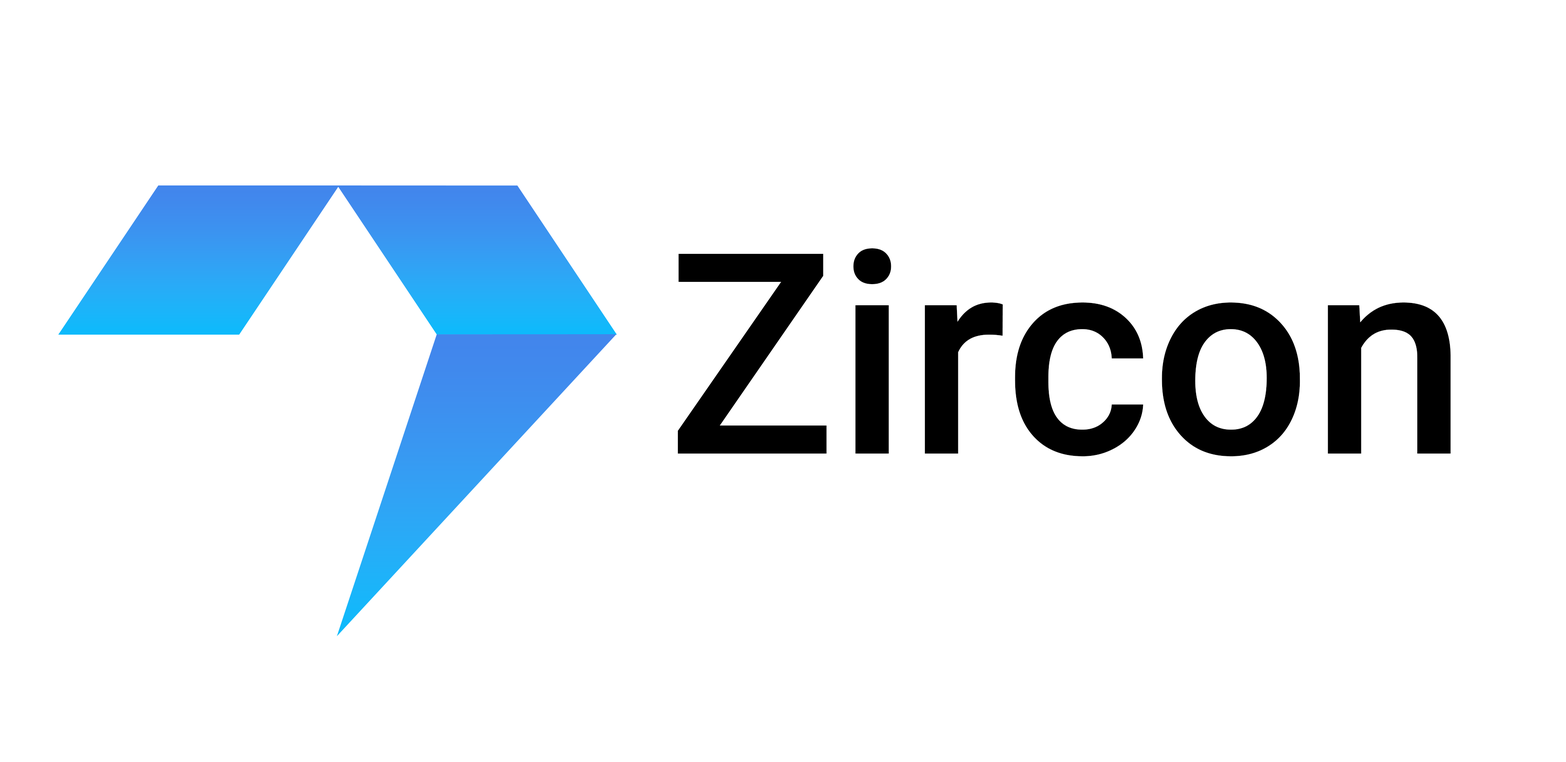
<style>
.page{position:relative;width:1566px;height:762px;background:#ffffff}
.page>*{position:absolute;margin:0}
.t1{font:281px "Roboto-Medium";color:#000000}
</style>
<div class="page">
<p class="t1" style="left:677px;top:248px;width:773px;height:208px">Zircon</p>
</div>
